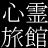
<style>
.page{position:relative;width:48px;height:48px;background:#000000}
.page>*{position:absolute;margin:0}
.t1{font:24px "MS-PMincho";color:#ffffff}
</style>
<div class="page">
<p class="t1" style="left:3px;top:2px;width:45px;height:21px">心霊</p>
<p class="t1" style="left:1px;top:26px;width:47px;height:22px">旅館</p>
</div>
